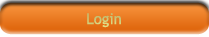
<style>
.page{position:relative;width:209px;height:37px}
.page>*{position:absolute;margin:0}
.t1{font:15px "TrebuchetMS";color:#d0cd7a}
</style>
<div class="page">
<p class="t1" style="left:87px;top:13px;width:34px;height:15px">Login</p>
</div>
